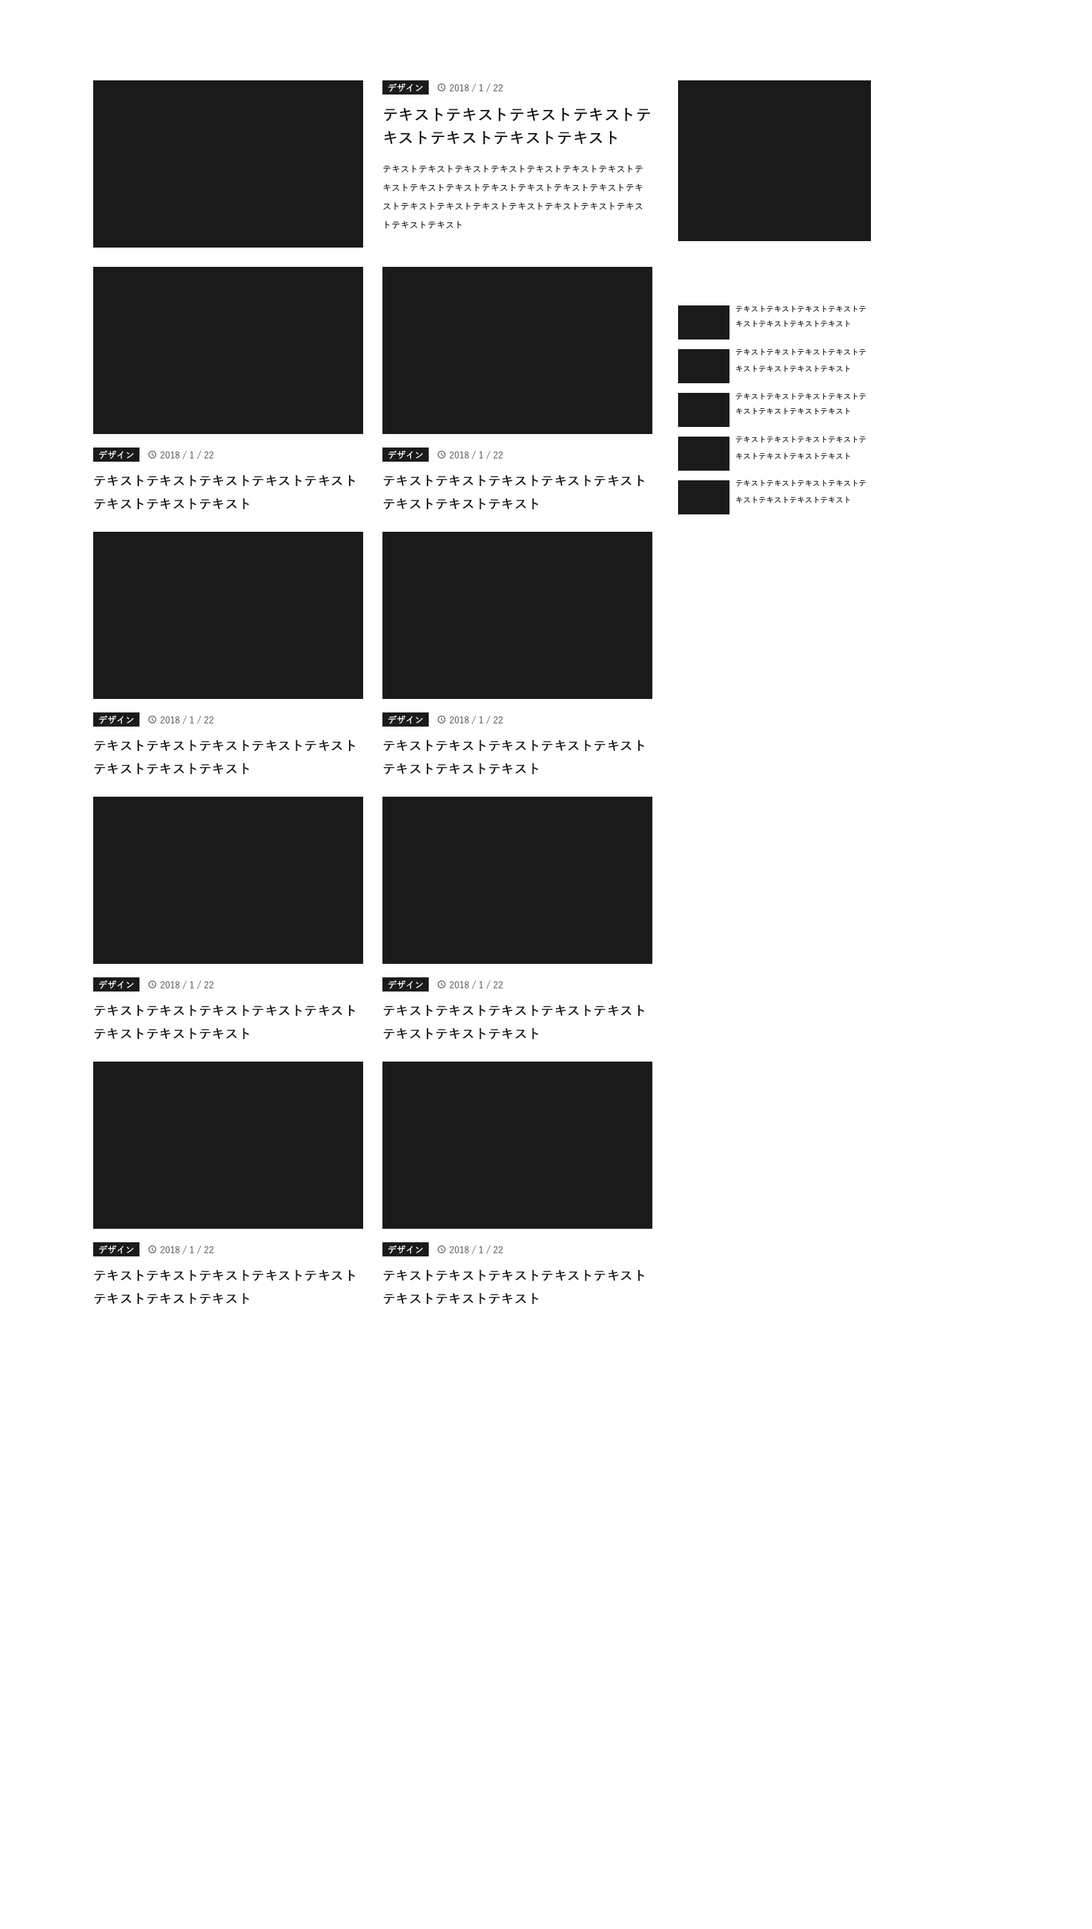
<style>
.page{position:relative;width:1092px;height:1929px;background:#ffffff}
.page>*{position:absolute;margin:0}
.t1{font:9px "YuGo-Medium";color:#ffffff}
.t2{font:9px "YuGo-Medium";color:#606060}
.t3{font:15.4px/23.1px "YuGo-Medium";color:#1a1a1a;font-weight:bold}
.t4{font:9px/18.6px "YuGo-Medium";color:#1a1a1a}
.t5{font:7.7px/14.8px "YuGo-Medium";color:#1a1a1a}
.t6{font:7.7px/16.7px "YuGo-Medium";color:#1a1a1a}
.t7{font:12.9px/23.1px "YuGo-Medium";color:#1a1a1a;font-weight:bold}
</style>
<div class="page">
<p class="t1" style="left:388px;top:83px;width:35px;height:9px">デザイン</p>
<p class="t2" style="left:449px;top:84px;width:54px;height:9px">2018 / 1 / 22</p>
<p class="t3" style="left:384px;top:107px;width:267px;height:38px">テキストテキストテキストテキストテキストテキストテキストテキスト</p>
<p class="t4" style="left:383px;top:165px;width:260px;height:64px">テキストテキストテキストテキストテキストテキストテキストテキストテキストテキストテキストテキストテキストテキストテキストテキストテキストテキストテキストテキストテキストテキストテキストテキスト</p>
<p class="t5" style="left:736px;top:305px;width:130px;height:22px">テキストテキストテキストテキストテキストテキストテキストテキスト</p>
<p class="t6" style="left:736px;top:348px;width:130px;height:24px">テキストテキストテキストテキストテキストテキストテキストテキスト</p>
<p class="t5" style="left:736px;top:393px;width:130px;height:22px">テキストテキストテキストテキストテキストテキストテキストテキスト</p>
<p class="t6" style="left:736px;top:436px;width:130px;height:24px">テキストテキストテキストテキストテキストテキストテキストテキスト</p>
<p class="t1" style="left:99px;top:450px;width:35px;height:9px">デザイン</p>
<p class="t2" style="left:160px;top:451px;width:53px;height:9px">2018 / 1 / 22</p>
<p class="t1" style="left:388px;top:450px;width:35px;height:9px">デザイン</p>
<p class="t2" style="left:449px;top:451px;width:54px;height:9px">2018 / 1 / 22</p>
<p class="t7" style="left:94px;top:475px;width:261px;height:34px">テキストテキストテキストテキストテキストテキストテキストテキスト</p>
<p class="t7" style="left:384px;top:475px;width:260px;height:34px">テキストテキストテキストテキストテキストテキストテキストテキスト</p>
<p class="t6" style="left:736px;top:480px;width:130px;height:23px">テキストテキストテキストテキストテキストテキストテキストテキスト</p>
<p class="t1" style="left:99px;top:715px;width:35px;height:9px">デザイン</p>
<p class="t2" style="left:160px;top:716px;width:53px;height:8px">2018 / 1 / 22</p>
<p class="t1" style="left:388px;top:715px;width:35px;height:9px">デザイン</p>
<p class="t2" style="left:449px;top:716px;width:54px;height:8px">2018 / 1 / 22</p>
<p class="t7" style="left:94px;top:740px;width:261px;height:34px">テキストテキストテキストテキストテキストテキストテキストテキスト</p>
<p class="t7" style="left:384px;top:740px;width:260px;height:34px">テキストテキストテキストテキストテキストテキストテキストテキスト</p>
<p class="t1" style="left:99px;top:980px;width:35px;height:9px">デザイン</p>
<p class="t2" style="left:160px;top:980px;width:53px;height:9px">2018 / 1 / 22</p>
<p class="t1" style="left:388px;top:980px;width:35px;height:9px">デザイン</p>
<p class="t2" style="left:449px;top:980px;width:54px;height:9px">2018 / 1 / 22</p>
<p class="t7" style="left:94px;top:1005px;width:261px;height:34px">テキストテキストテキストテキストテキストテキストテキストテキスト</p>
<p class="t7" style="left:384px;top:1005px;width:260px;height:34px">テキストテキストテキストテキストテキストテキストテキストテキスト</p>
<p class="t1" style="left:99px;top:1245px;width:35px;height:9px">デザイン</p>
<p class="t2" style="left:160px;top:1245px;width:53px;height:9px">2018 / 1 / 22</p>
<p class="t1" style="left:388px;top:1245px;width:35px;height:9px">デザイン</p>
<p class="t2" style="left:449px;top:1245px;width:54px;height:9px">2018 / 1 / 22</p>
<p class="t7" style="left:94px;top:1270px;width:261px;height:34px">テキストテキストテキストテキストテキストテキストテキストテキスト</p>
<p class="t7" style="left:384px;top:1270px;width:260px;height:34px">テキストテキストテキストテキストテキストテキストテキストテキスト</p>
</div>
